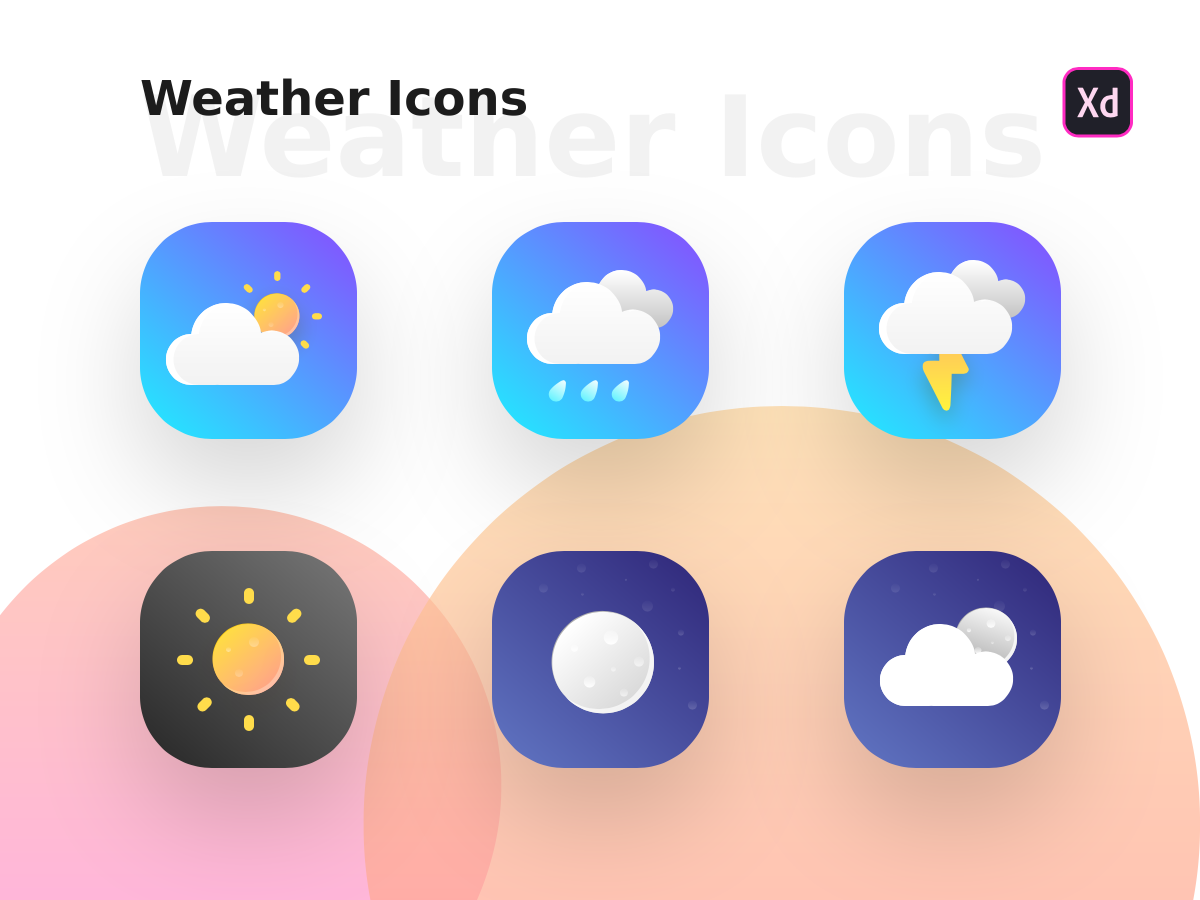
<style>
.page{position:relative;width:1200px;height:900px;background:#ffffff}
.page>*{position:absolute;margin:0}
.t1{font:48px "Gilroy-ExtraBold";color:#1c1c1c}
</style>
<div class="page">
<p class="t1" style="left:141px;top:78px;width:385px;height:38px">Weather Icons</p>
</div>
